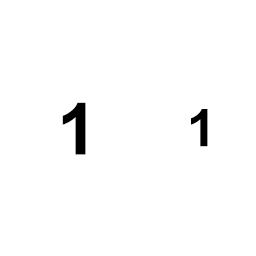
<style>
.page{position:relative;width:256px;height:256px;background:#ffffff}
.page>*{position:absolute;margin:0}
.t1{font:72px "Arial-BoldMT";color:#000000}
.t2{font:51.5px "Arial-BoldMT";color:#000000}
</style>
<div class="page">
<p class="t1" style="left:62px;top:102px;width:24px;height:53px">1</p>
<p class="t2" style="left:191px;top:109px;width:17px;height:38px">1</p>
</div>
